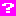
<style>
.page{position:relative;width:16px;height:16px;background:#ff00ff}
.page>*{position:absolute;margin:0}
.t1{font:17.5px "System";color:#ffffff;scale:1.92 1}
</style>
<div class="page">
<p class="t1" style="left:2px;top:3px;width:12px;height:10px">?</p>
</div>
